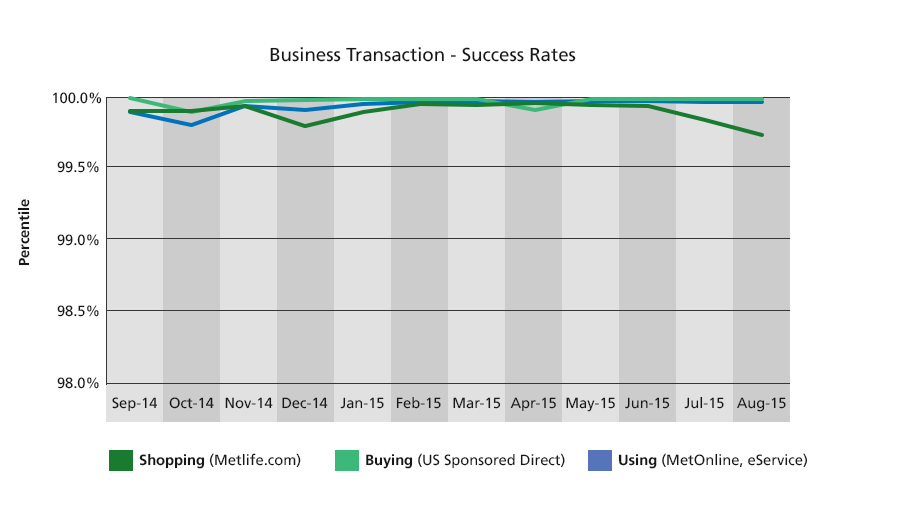
<style>
.page{position:relative;width:912px;height:517px;background:#ffffff}
.page>*{position:absolute;margin:0}
.t1{font:18.7px "FrutigerLTStd-Roman";color:#161816}
.t2{font:14.7px "FrutigerLTStd-Roman";color:#161816}
.t3{font:14.5px "FrutigerLTStd-Bold";color:#161816}
.t4{font:14.7px "FrutigerLTStd-Bold";color:#161816}
</style>
<div class="page">
<p class="t1" style="left:270px;top:47px;width:306px;height:15px">Business Transaction - Success Rates</p>
<p class="t2" style="left:53px;top:92px;width:49px;height:12px">100.0%</p>
<p class="t2" style="left:57px;top:161px;width:42px;height:12px">99.5%</p>
<p class="t3" style="left:17px;top:199px;width:13px;height:67px;rotate:-90deg">Percentile</p>
<p class="t2" style="left:57px;top:234px;width:42px;height:12px">99.0%</p>
<p class="t2" style="left:57px;top:305px;width:42px;height:12px">98.5%</p>
<p class="t2" style="left:57px;top:377px;width:42px;height:12px">98.0%</p>
<p class="t2" style="left:112px;top:397px;width:45px;height:14px">Sep-14</p>
<p class="t2" style="left:169px;top:397px;width:45px;height:12px">Oct-14</p>
<p class="t2" style="left:225px;top:397px;width:48px;height:12px">Nov-14</p>
<p class="t2" style="left:282px;top:397px;width:46px;height:12px">Dec-14</p>
<p class="t2" style="left:340px;top:397px;width:44px;height:12px">Jan-15</p>
<p class="t2" style="left:396px;top:397px;width:45px;height:12px">Feb-15</p>
<p class="t2" style="left:453px;top:397px;width:48px;height:12px">Mar-15</p>
<p class="t2" style="left:510px;top:397px;width:46px;height:14px">Apr-15</p>
<p class="t2" style="left:566px;top:397px;width:49px;height:15px">May-15</p>
<p class="t2" style="left:625px;top:397px;width:45px;height:12px">Jun-15</p>
<p class="t2" style="left:684px;top:396px;width:40px;height:13px">Jul-15</p>
<p class="t2" style="left:737px;top:397px;width:49px;height:15px">Aug-15</p>
<p class="t2" style="left:139px;top:453px;width:162px;height:16px"><span class="t4">Shopping</span> (Metlife.com)</p>
<p class="t2" style="left:366px;top:453px;width:199px;height:16px"><span class="t4">Buying</span> (US Sponsored Direct)</p>
<p class="t2" style="left:618px;top:453px;width:190px;height:16px"><span class="t4">Using</span> (MetOnline, eService)</p>
</div>
